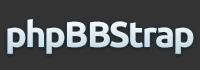
<style>
.page{position:relative;width:200px;height:70px;background:#333333}
.page>*{position:absolute;margin:0}
.t1{font:36px "Ubuntu-Bold";letter-spacing:-0.05em;color:#dee9ef}
</style>
<div class="page">
<p class="t1" style="left:7px;top:19px;width:187px;height:35px">phpBBStrap</p>
</div>
